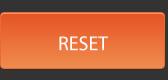
<style>
.page{position:relative;width:168px;height:80px;background:#333333}
.page>*{position:absolute;margin:0}
.t1{font:20px "MyriadPro-Regular";color:#ffffff}
</style>
<div class="page">
<p class="t1" style="left:59px;top:36px;width:49px;height:15px">RESET</p>
</div>
